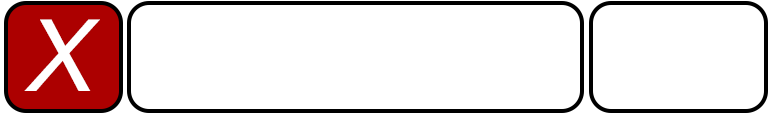
<style>
.page{position:relative;width:773px;height:114px;background:#ffffff}
.page>*{position:absolute;margin:0}
.t1{font:100px "MicrosoftSansSerif";color:#ffffff;font-style:italic}
</style>
<div class="page">
<p class="t1" style="left:24px;top:19px;width:76px;height:72px">X</p>
</div>
